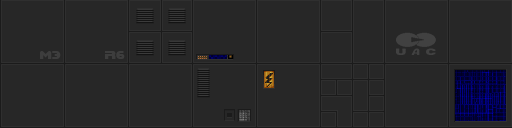
<style>
.page{position:relative;width:512px;height:128px;background:#272727}
.page>*{position:absolute;margin:0}
.t1{font:10px "DooM";color:#3d3d3d}
</style>
<div class="page">
<p class="t1" style="left:40px;top:51px;width:21px;height:8px">M3</p>
<p class="t1" style="left:105px;top:51px;width:20px;height:8px">R6</p>
</div>
